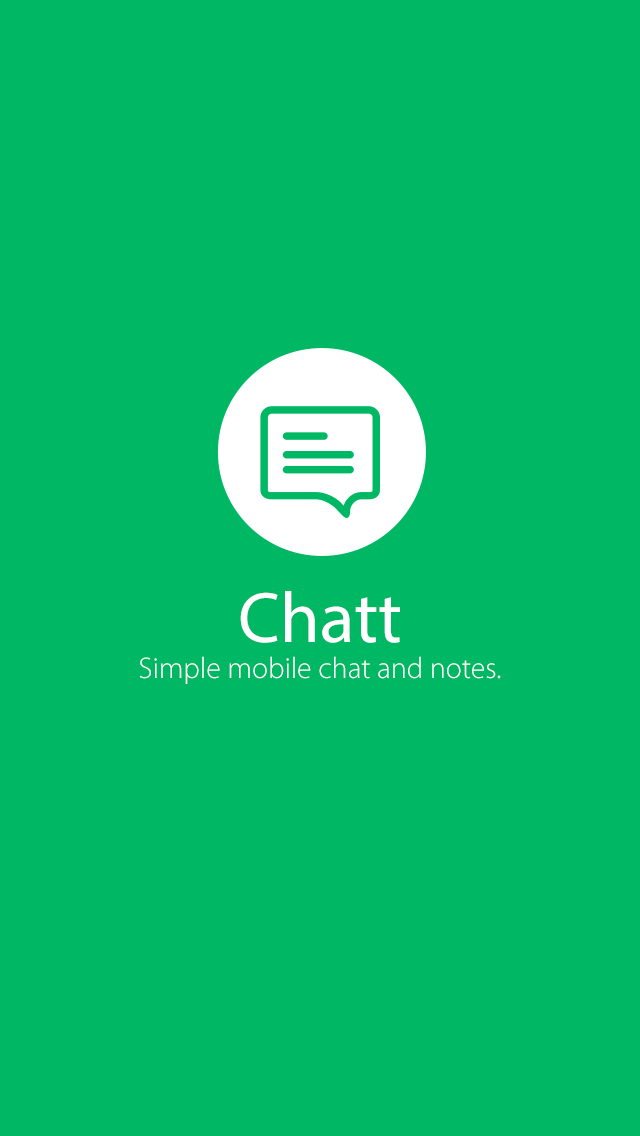
<style>
.page{position:relative;width:640px;height:1136px;background:#00b863}
.page>*{position:absolute;margin:0}
.t1{font:30px "MyriadPro-Light";color:#ffffff}
.t2{font:72px/88px "MyriadPro-Regular";color:#ffffff}
</style>
<div class="page">
<p class="t1" style="left:139px;top:591px;width:362px;height:93px;text-align:center"><span class="t2">Chatt<br></span>Simple mobile chat and notes.</p>
</div>
